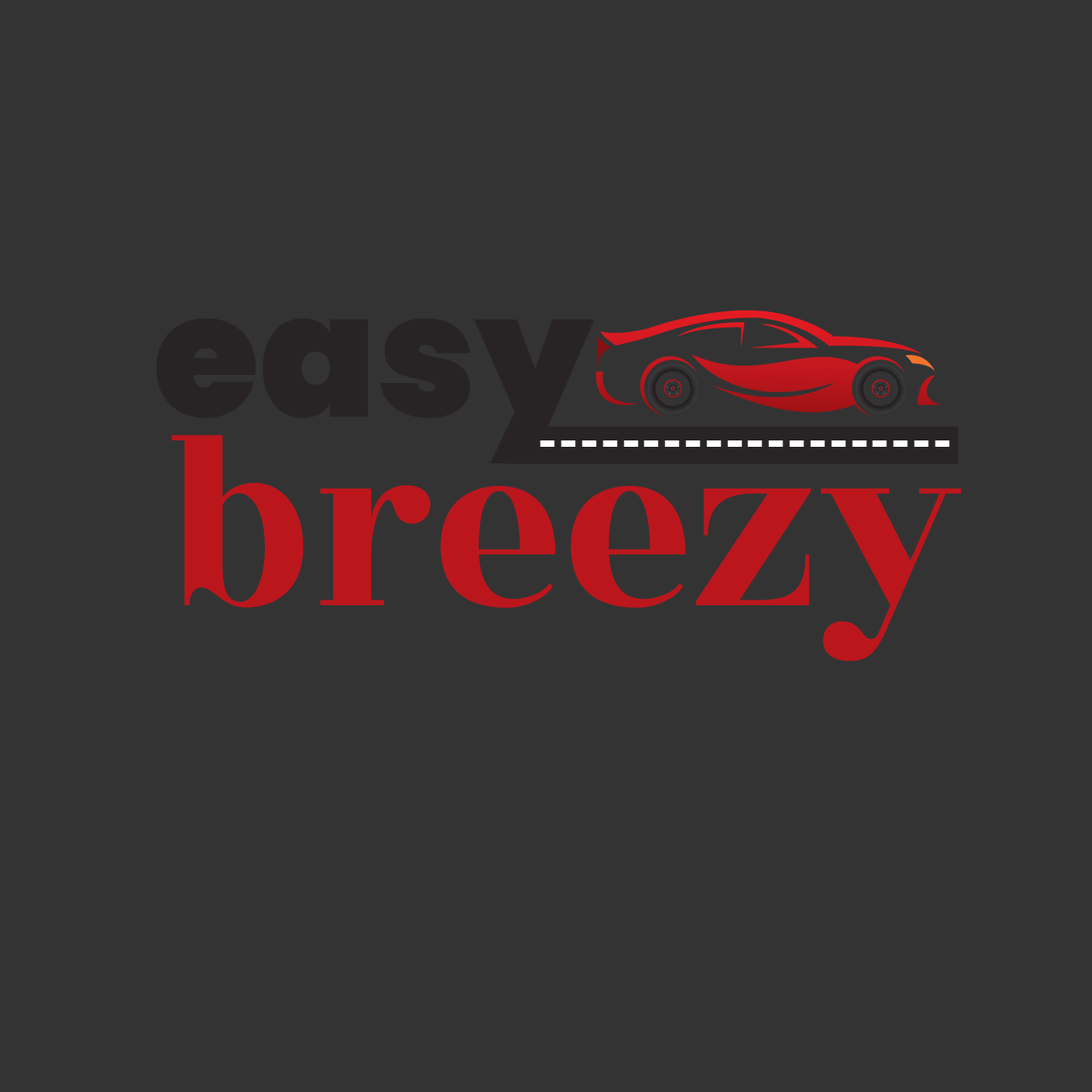
<style>
.page{position:relative;width:1092px;height:1092px;background:#333333}
.page>*{position:absolute;margin:0}
.t1{font:172.5px "Poppins-Black";color:#282425}
.t2{font:253.7px "RozhaOne";color:#bc161d}
.t3{font:83.1px "RozhaOne";color:#ffffff}
</style>
<div class="page">
<p class="t1" style="left:156px;top:318px;width:439px;height:146px">easy</p>
<p class="t2" style="left:171px;top:435px;width:790px;height:227px">breezy</p>
<p class="t3" style="left:540px;top:440px;width:410px;height:7px">--------------------</p>
</div>
